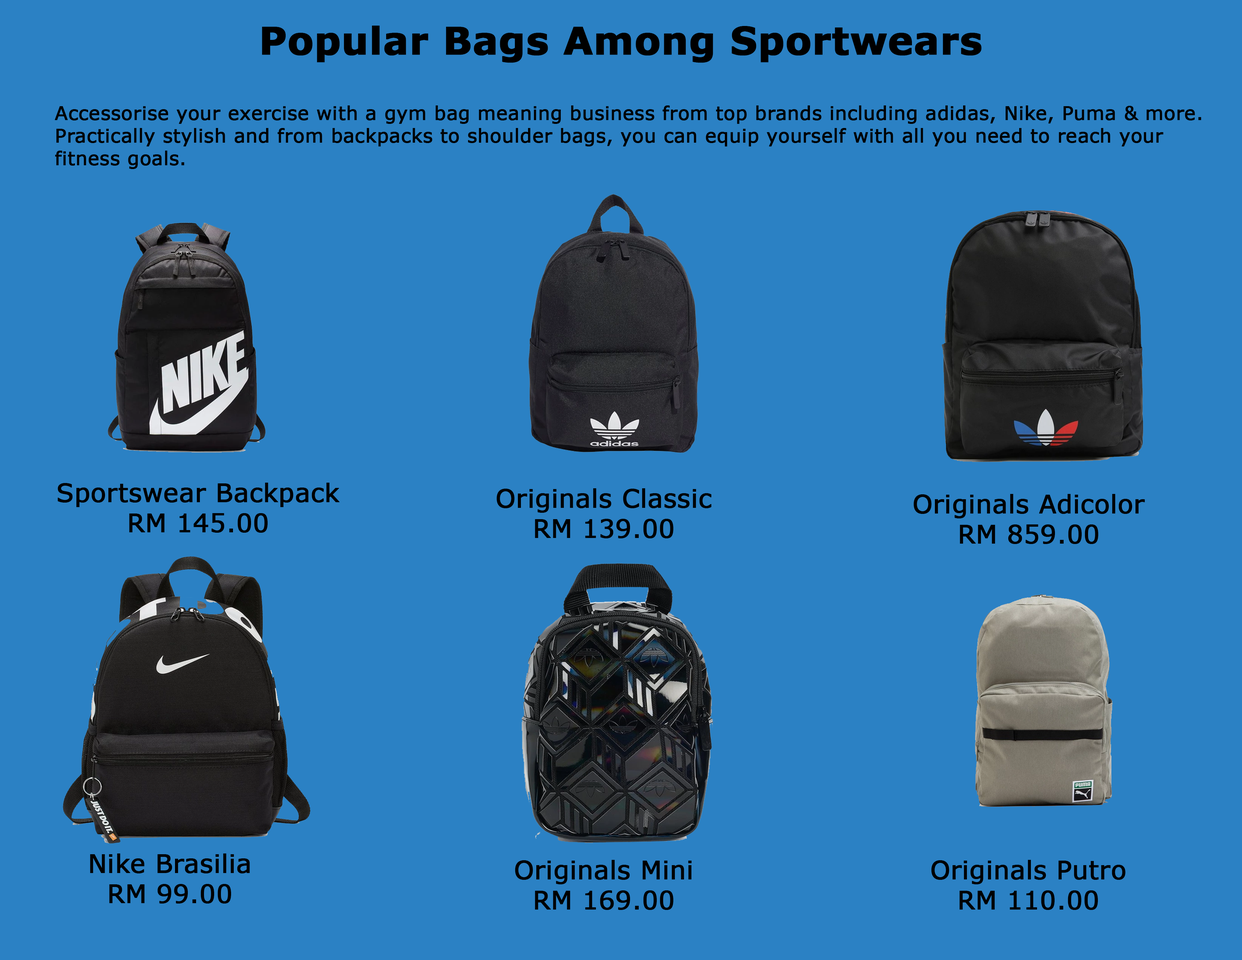
<style>
.page{position:relative;width:1242px;height:960px;background:#2b81c4}
.page>*{position:absolute;margin:0}
.t1{font:37.6px "Verdana-Bold";color:#000000;font-weight:bold}
.t2{font:18.8px "Verdana";color:#000000;font-weight:bold}
.t3{font:25.1px "Verdana";color:#000000;font-weight:bold}
</style>
<div class="page">
<p class="t1" style="left:262px;top:26px;width:720px;height:37px">Popular Bags Among Sportwears</p>
<p class="t2" style="left:55px;top:105px;width:1147px;height:64px">Accessorise your exercise with a gym bag meaning business from top brands including adidas, Nike, Puma &amp; more. <br>Practically stylish and from backpacks to shoulder bags, you can equip yourself with all you need to reach your <br>fitness goals.</p>
<p class="t3" style="left:58px;top:483px;width:282px;height:50px;text-align:center">Sportswear Backpack<br>RM 145.00</p>
<p class="t3" style="left:497px;top:488px;width:214px;height:50px;text-align:center">Originals Classic<br>RM 139.00</p>
<p class="t3" style="left:914px;top:494px;width:231px;height:50px;text-align:center">Originals Adicolor<br>RM 859.00</p>
<p class="t3" style="left:90px;top:853px;width:160px;height:50px;text-align:center">Nike Brasilia<br>RM 99.00</p>
<p class="t3" style="left:515px;top:860px;width:177px;height:50px;text-align:center">Originals Mini<br>RM 169.00</p>
<p class="t3" style="left:931px;top:860px;width:195px;height:50px;text-align:center">Originals Putro<br>RM 110.00</p>
</div>
